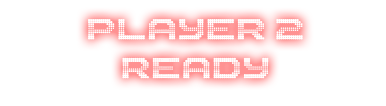
<style>
.page{position:relative;width:386px;height:106px;background:#ffffff}
.page>*{position:absolute;margin:0}
.t1{font:32.4px "The-2K12";color:#ffffff}
</style>
<div class="page">
<p class="t1" style="left:88px;top:19px;width:215px;height:60px;text-align:center">PLAYER 2<br>Ready</p>
</div>
